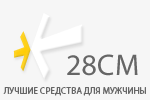
<style>
.page{position:relative;width:150px;height:100px;background:#f6f6f6}
.page>*{position:absolute;margin:0}
.t1{font:30px "MyriadPro-Regular";color:#666666;text-transform:uppercase}
.t2{font:9px "MyriadPro-Regular";color:#666666;text-transform:uppercase}
</style>
<div class="page">
<p class="t1" style="left:67px;top:54px;width:71px;height:22px">28cm</p>
<p class="t2" style="left:3px;top:87px;width:143px;height:9px">лучшие средства для мужчины</p>
</div>
